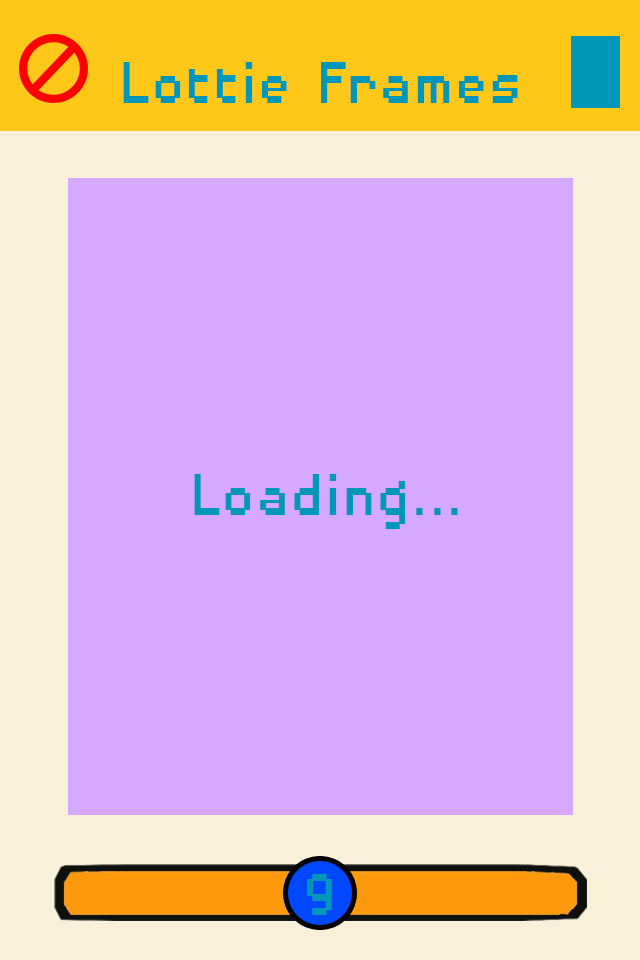
<style>
.page{position:relative;width:640px;height:960px;background:#d6a8ff}
.page>*{position:absolute;margin:0}
.t1{font:76.6px "DisposableDroidBB";color:#0097b8;scale:0.91 1}
</style>
<div class="page">
<p class="t1" style="left:123px;top:62px;width:395px;height:41px">Lottie Frames</p>
<p class="t1" style="left:307px;top:874px;width:25px;height:41px">9</p>
</div>
